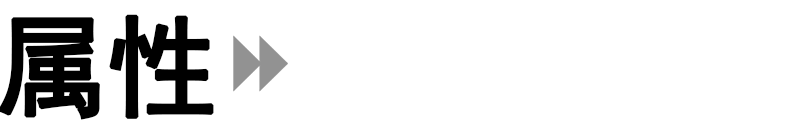
<style>
.page{position:relative;width:808px;height:127px;background:#ffffff}
.page>*{position:absolute;margin:0}
.t1{font:110.8px "SimHei";letter-spacing:0.06em;color:#000000;font-weight:bold}
</style>
<div class="page">
<p class="t1" style="left:0px;top:14px;width:214px;height:106px">属性</p>
</div>
